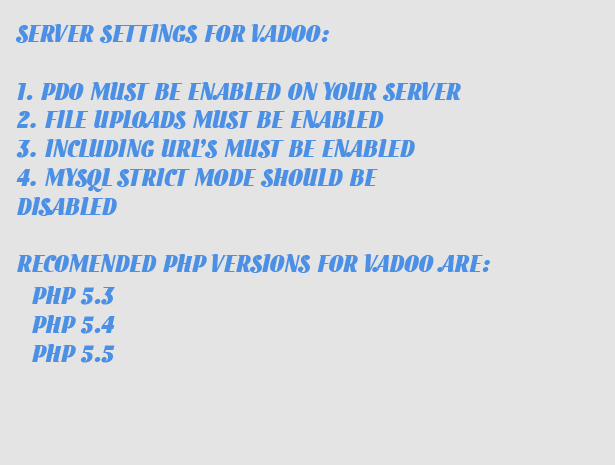
<style>
.page{position:relative;width:615px;height:465px;background:#e4e4e4}
.page>*{position:absolute;margin:0}
.t1{font:24px "InkredibleOne";color:#4c90e5}
</style>
<div class="page">
<p class="t1" style="left:15px;top:24px;width:475px;height:249px">SERVER SETTINGS FOR VADOO: <br><br>1. PDO MUST BE ENABLED ON YOUR SERVER<br>2. FILE UPLOADS MUST BE ENABLED<br>3. INCLUDING URL’S MUST BE ENABLED<br>4. MYSQL STRICT MODE SHOULD BE<br>DISABLED<br><br>RECOMENDED PHP VERSIONS FOR VADOO ARE:</p>
<p class="t1" style="left:32px;top:286px;width:83px;height:77px">PHP 5.3<br>PHP 5.4<br>PHP 5.5</p>
</div>
